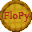
<style>
.page{position:relative;width:32px;height:32px}
.page>*{position:absolute;margin:0}
.t1{font:14px "Kokila";color:#b42b2b}
</style>
<div class="page">
<p class="t1" style="left:3px;top:11px;width:27px;height:11px">FloPy</p>
</div>
